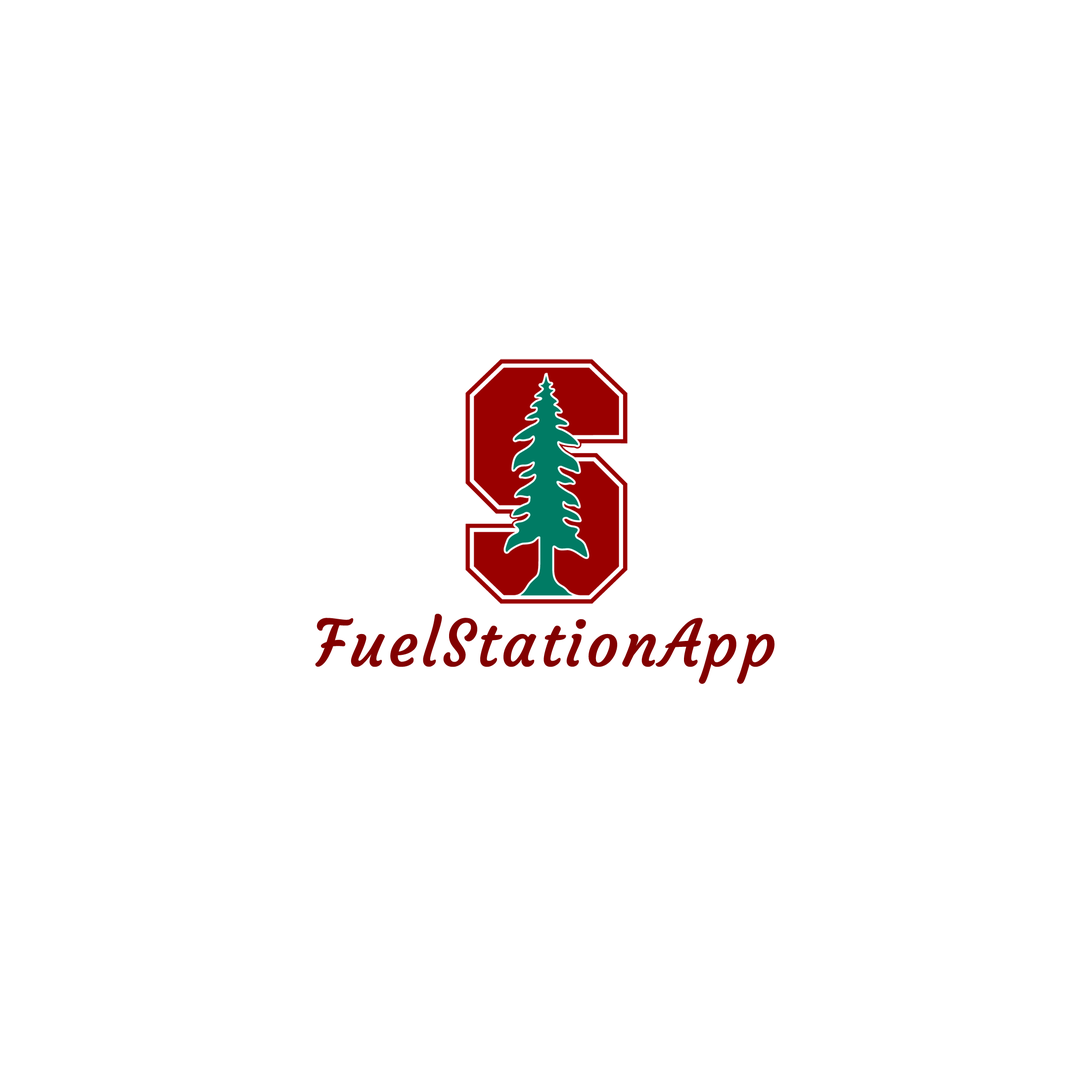
<style>
.page{position:relative;width:1092px;height:1092px;background:#ffffff}
.page>*{position:absolute;margin:0}
.t1{font:63.3px "Courgette-Regular";letter-spacing:0.025em;color:#820000;font-weight:bold}
</style>
<div class="page">
<p class="t1" style="left:315px;top:614px;width:459px;height:70px">FuelStationApp</p>
</div>
